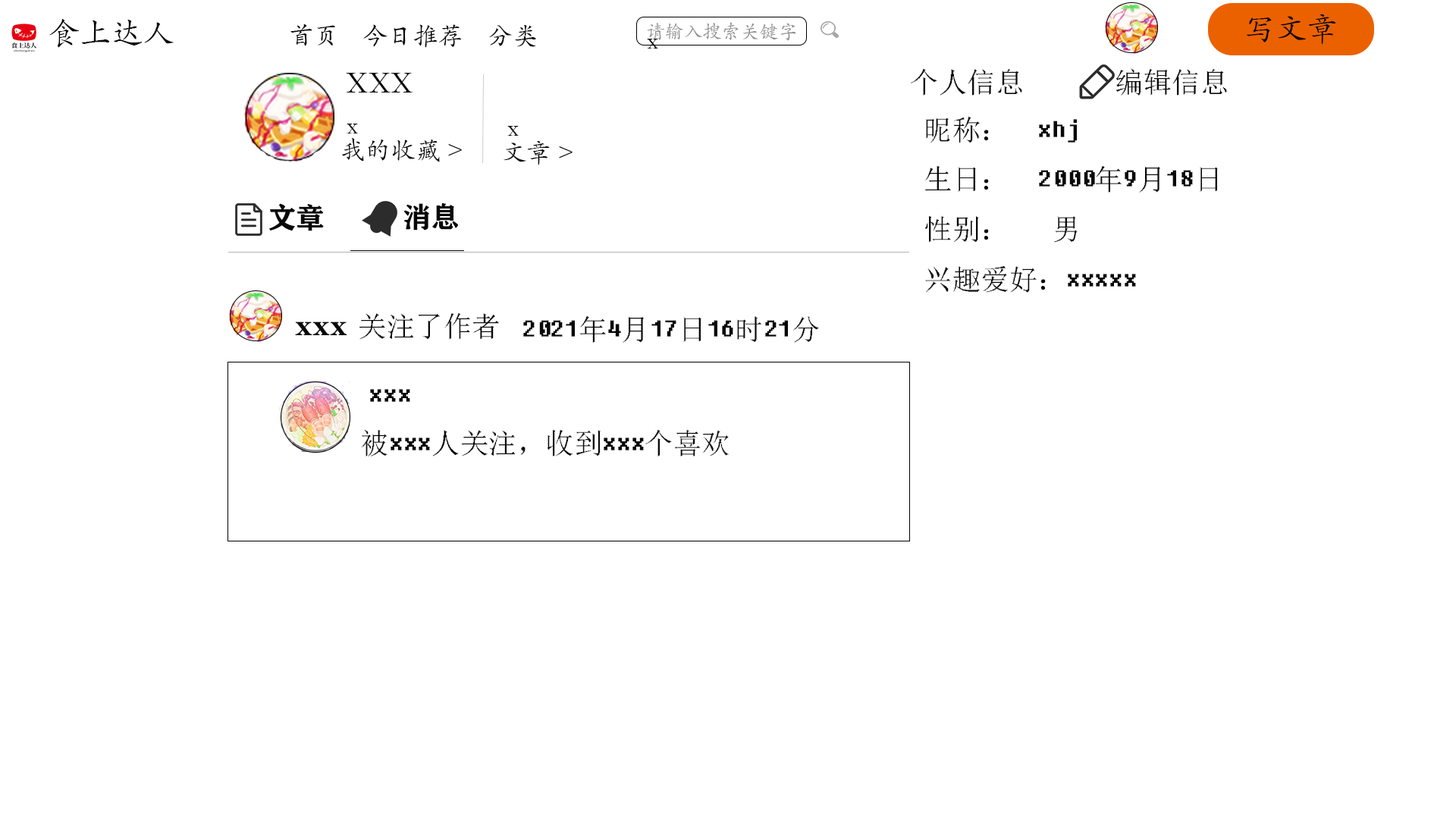
<style>
.page{position:relative;width:1456px;height:819px;background:#ffffff}
.page>*{position:absolute;margin:0}
.t1{font:31.6px "STKaiti";color:#080808}
.t2{font:25.3px "STKaiti";color:#080808}
.t3{font:19px "STKaiti";color:#8f8f8f}
.t4{font:25.3px "STKaiti";color:#0b0b0b}
.t5{font:31.6px "STKaiti";color:#0b0b0b}
.t6{font:28.4px "Fixedsys";color:#080808}
.t7{font:28.4px "FZCHSJW--GB1-0";color:#080808}
</style>
<div class="page">
<p class="t1" style="left:1246px;top:14px;width:90px;height:30px">写文章</p>
<p class="t1" style="left:49px;top:19px;width:125px;height:29px">食上达人</p>
<p class="t2" style="left:290px;top:24px;width:45px;height:22px">首页</p>
<p class="t2" style="left:363px;top:24px;width:98px;height:24px">今日推荐</p>
<p class="t2" style="left:489px;top:25px;width:47px;height:22px">分类</p>
<p class="t3" style="left:647px;top:22px;width:149px;height:19px">请输入搜索关键字</p>
<p class="t4" style="left:647px;top:39px;width:11px;height:10px">x</p>
<p class="t5" style="left:346px;top:73px;width:67px;height:20px">XXX</p>
<p class="t6" style="left:911px;top:68px;width:111px;height:28px">个人信息</p>
<p class="t6" style="left:1115px;top:68px;width:112px;height:28px">编辑信息</p>
<p class="t4" style="left:347px;top:124px;width:11px;height:9px">x</p>
<p class="t4" style="left:507px;top:126px;width:12px;height:10px">x</p>
<p class="t6" style="left:924px;top:116px;width:294px;height:177px">昵称：  xhj<br>生日：  2000年9月18日<br>性别：   男<br>兴趣爱好：xxxxx</p>
<p class="t4" style="left:342px;top:138px;width:120px;height:24px">我的收藏 &gt;</p>
<p class="t4" style="left:504px;top:141px;width:69px;height:24px">文章 &gt;</p>
<p class="t7" style="left:269px;top:203px;width:55px;height:28px">文章</p>
<p class="t7" style="left:403px;top:202px;width:55px;height:29px">消息</p>
<p class="t6" style="left:359px;top:312px;width:140px;height:28px">关注了作者</p>
<p class="t6" style="left:523px;top:315px;width:296px;height:28px">2021年4月17日16时21分</p>
<p class="t7" style="left:295px;top:322px;width:52px;height:13px">xxx</p>
<p class="t6" style="left:370px;top:389px;width:40px;height:13px">xxx</p>
<p class="t6" style="left:361px;top:429px;width:368px;height:28px">被xxx人关注，收到xxx个喜欢</p>
</div>
